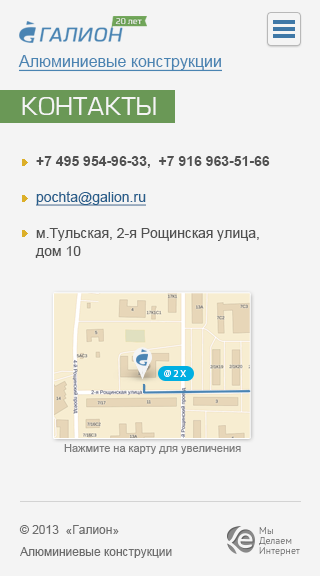
<style>
.page{position:relative;width:320px;height:576px;background:#f4f4f4}
.page>*{position:absolute;margin:0}
.t1{font:16px "ArialMT";color:#4a84b2;text-decoration:underline}
.t2{font:24px "EuropeNormal";color:#f4f4f4;text-transform:uppercase}
.t3{font:14px/18px "ArialMT";color:#515151}
.t4{font:14px/18px "Arial-BoldMT";color:#515151}
.t5{font:14px/18px "ArialMT";color:#275e8b;text-decoration:underline}
.t6{font:10.1px "MyriadPro-Regular";letter-spacing:0.18em;color:#ffffff;text-transform:uppercase}
.t7{font:11px "ArialMT";color:#7c7c7c}
.t8{font:12px/22px "ArialMT";color:#6d6d6d}
.t9{font:12px/14px "ArialMT";color:#6d6d6d}
.t10{font:10px/10px "PTSans-Regular";color:#636363}
</style>
<div class="page">
<p class="t1" style="left:18px;top:55px;width:204px;height:17px">Алюминиевые конструкции</p>
<p class="t2" style="left:22px;top:97px;width:134px;height:18px">Контакты</p>
<p class="t3" style="left:35px;top:156px;width:235px;height:102px"><span class="t4">+7 495 954-96-33,  +7 916 963-51-66<br><br></span><span class="t5">pochta@galion.ru<br><br></span>м.Тульская, 2-я Рощинская улица, <br>дом 10</p>
<p class="t6" style="left:164px;top:370px;width:22px;height:7px">@2X</p>
<p class="t7" style="left:64px;top:444px;width:177px;height:10px">Нажмите на карту для увеличения</p>
<p class="t8" style="left:19px;top:525px;width:153px;height:33px">© 2013  «Галион»<br>Алюминиевые <span class="t9">конструкции</span></p>
<p class="t10" style="left:259px;top:527px;width:41px;height:29px">Мы <br>Делаем<br>Интернет</p>
</div>
